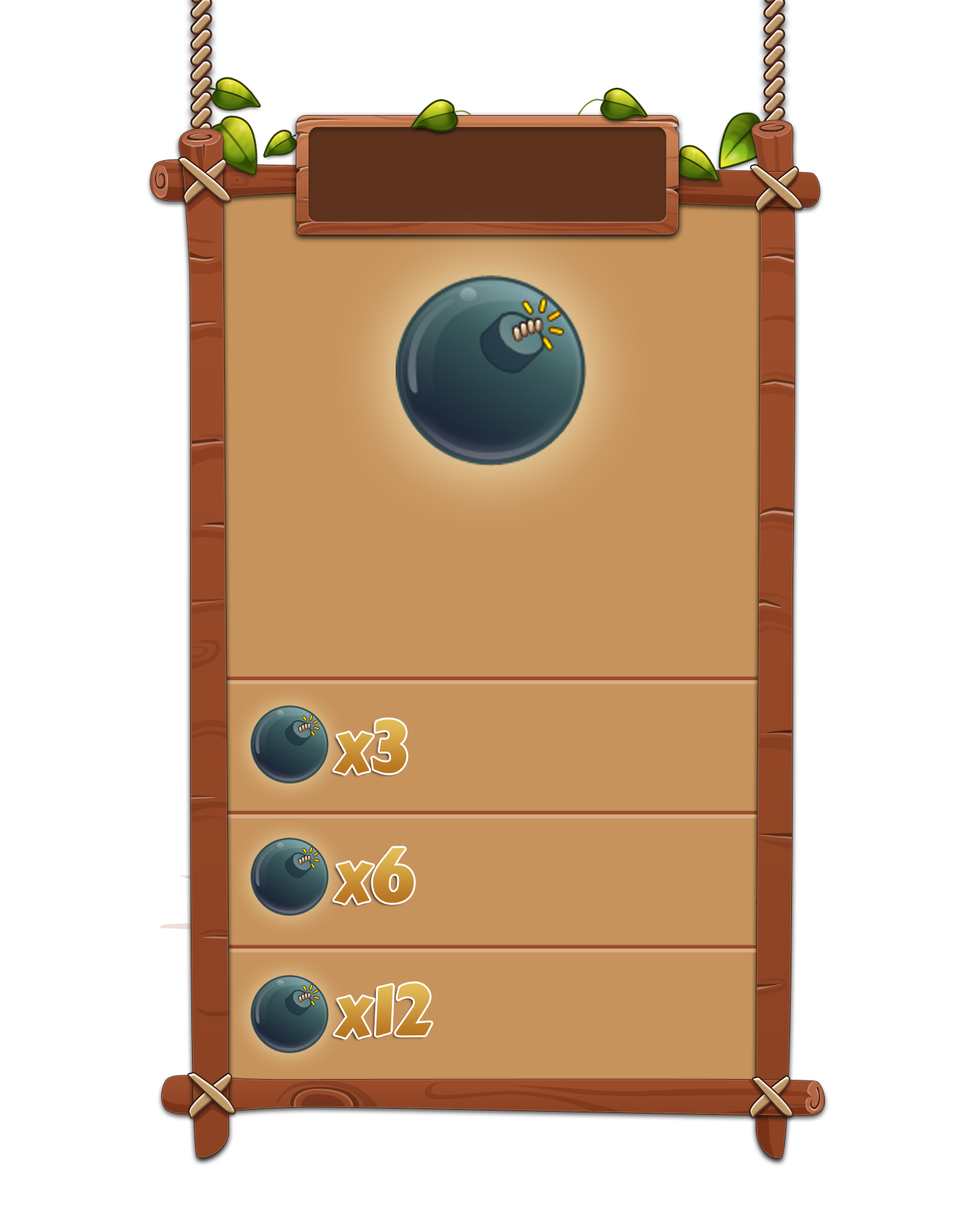
<style>
.page{position:relative;width:977px;height:1221px;background:#ffffff}
.page>*{position:absolute;margin:0}
.t1{font:71.2px "CarterOne";letter-spacing:-0.02em}
</style>
<div class="page">
<p class="t1" style="left:334px;top:719px;width:72px;height:55px">x3</p>
<p class="t1" style="left:334px;top:848px;width:80px;height:56px">x6</p>
<p class="t1" style="left:334px;top:983px;width:98px;height:55px">x12</p>
</div>
